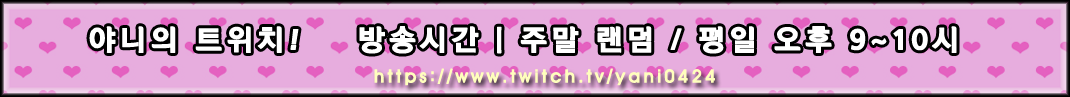
<style>
.page{position:relative;width:1070px;height:97px;background:#e7adde}
.page>*{position:absolute;margin:0}
.t1{font:29.1px "NYJ-Gothic-EB";letter-spacing:0.12em;color:#ffffff;font-weight:bold}
.t2{font:17.5px "±èÁ¦½ÃÃ¼M";letter-spacing:0.12em;color:#ffffbd;font-weight:bold}
</style>
<div class="page">
<p class="t1" style="left:89px;top:26px;width:868px;height:28px">야니의 트위치!    방송시간 | 주말 랜덤 / 평일 오후 9~10시</p>
<p class="t2" style="left:374px;top:68px;width:341px;height:18px">https://www.twitch.tv/yani0424</p>
</div>
